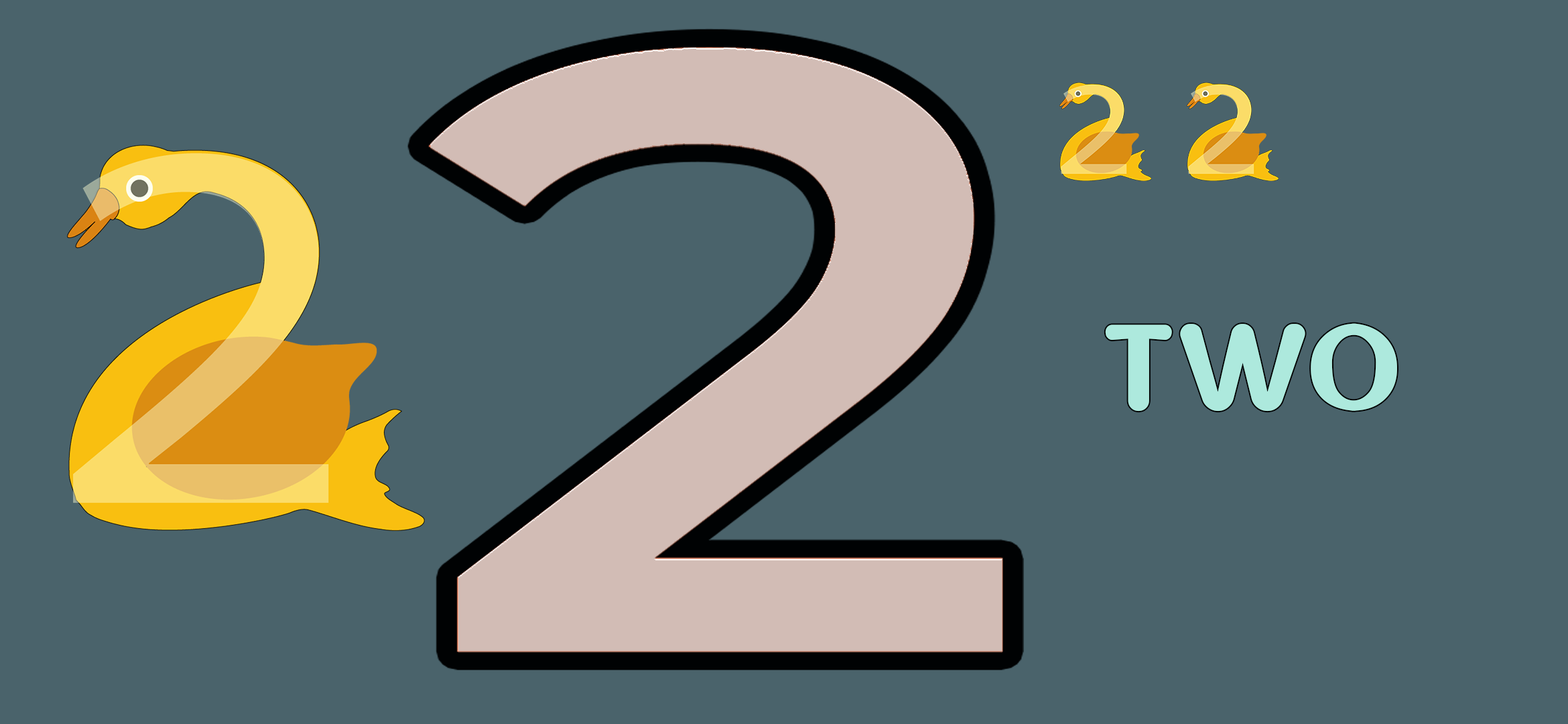
<style>
.page{position:relative;width:1568px;height:724px;background:#4a636b}
.page>*{position:absolute;margin:0}
.t1{font:139.6px "Dyuthi";color:#ade9dd}
</style>
<div class="page">
<p class="t1" style="left:1105px;top:323px;width:292px;height:88px">TWO</p>
</div>
